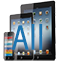
<style>
.page{position:relative;width:57px;height:64px;background:#ffffff}
.page>*{position:absolute;margin:0}
.t1{font:36px "MyriadPro-Regular";color:#1c75b0;font-weight:bold;scale:0.8 1}
</style>
<div class="page">
<p class="t1" style="left:12px;top:24px;width:31px;height:26px">All</p>
</div>
